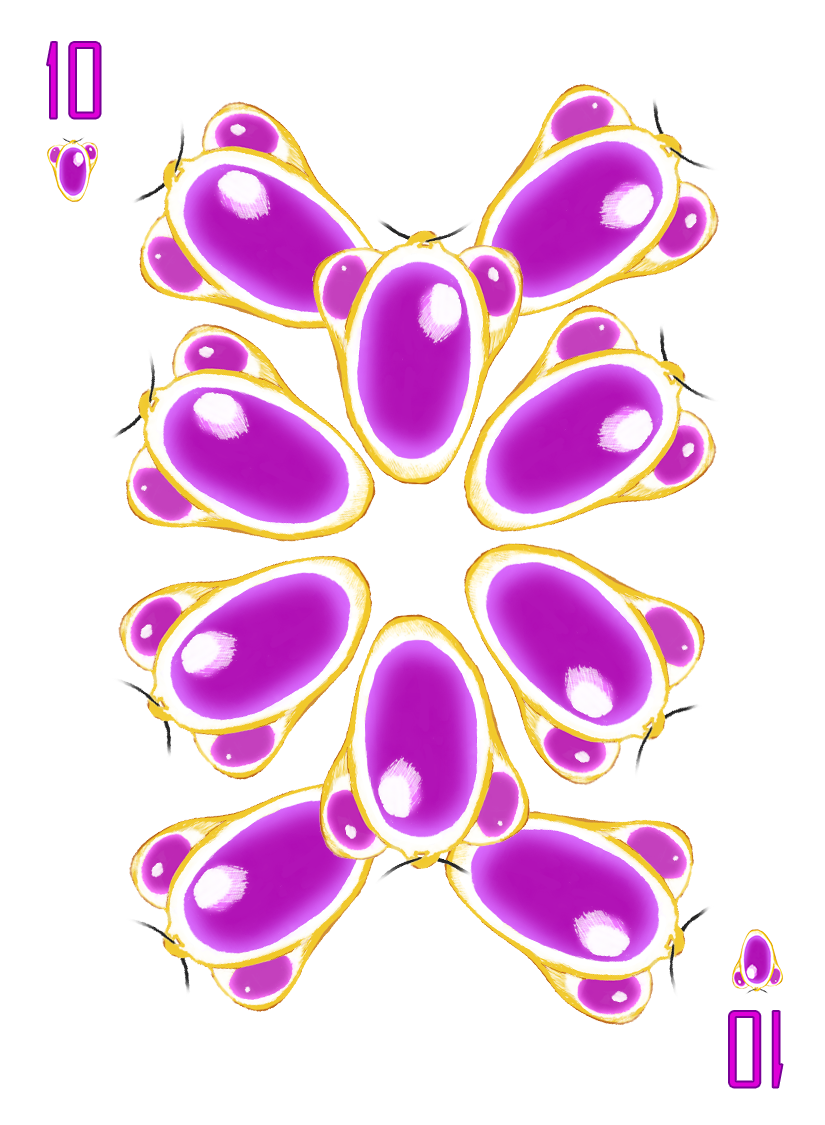
<style>
.page{position:relative;width:825px;height:1125px;background:#ffffff}
.page>*{position:absolute;margin:0}
.t1{font:100px "AgencyFB-Reg";color:#de00d8}
</style>
<div class="page">
<p class="t1" style="left:47px;top:42px;width:54px;height:77px">10</p>
<p class="t1" style="left:729px;top:1011px;width:54px;height:77px;rotate:180deg">10</p>
</div>
